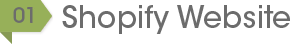
<style>
.page{position:relative;width:294px;height:44px;background:#ffffff}
.page>*{position:absolute;margin:0}
.t1{font:30px "ITCAvantGardeStd-Md";color:#6c6c6c}
.t2{font:20.9px "ITCAvantGardeStd-Md";color:#6c6c6c}
</style>
<div class="page">
<p class="t1" style="left:62px;top:5px;width:228px;height:29px">Shopify Website</p>
<p class="t2" style="left:13px;top:7px;width:20px;height:16px">01</p>
</div>
